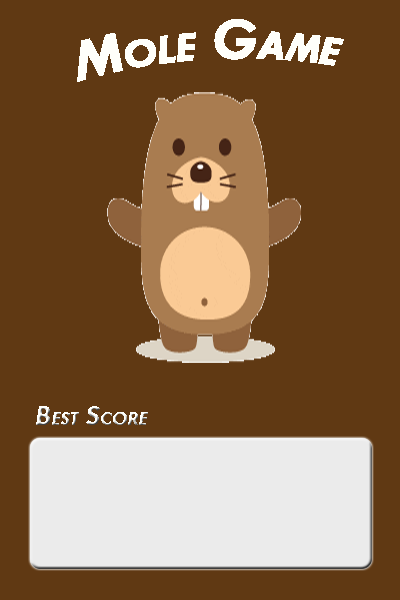
<style>
.page{position:relative;width:400px;height:600px;background:#603913}
.page>*{position:absolute;margin:0}
.t1{font:60px "TwCenMT-BoldItalic";color:#fffffa;font-variant:small-caps}
.t2{font:30px "TwCenMT-BoldItalic";font-variant:small-caps}
</style>
<div class="page">
<p class="t1" style="left:77px;top:19px;width:267px;height:63px">Mole Game</p>
<p class="t2" style="left:36px;top:406px;width:112px;height:19px">Best Score</p>
</div>
